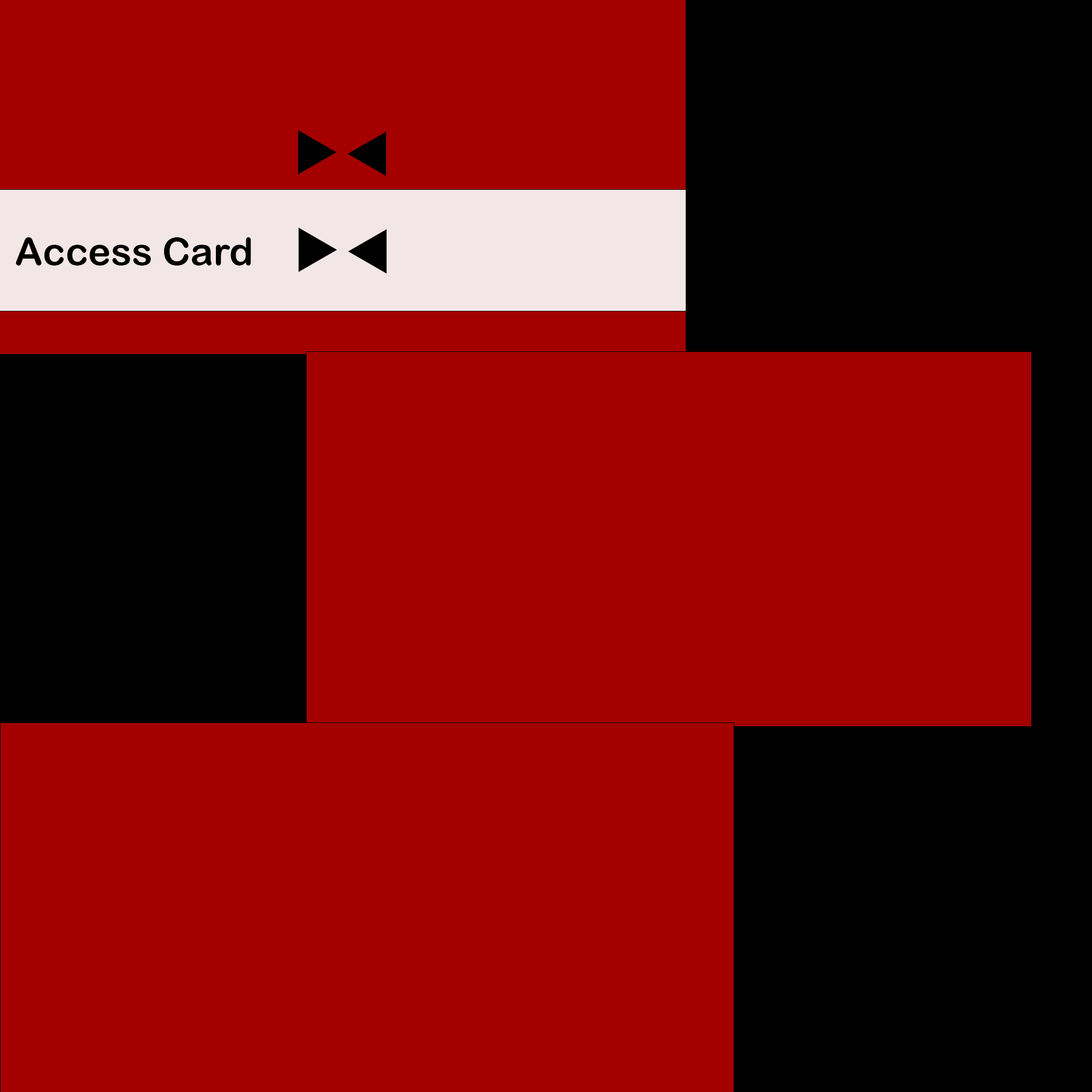
<style>
.page{position:relative;width:1092px;height:1092px;background:#a40000}
.page>*{position:absolute;margin:0}
.t1{font:38.4px "ArialRoundedMTBold";color:#000000}
</style>
<div class="page">
<p class="t1" style="left:15px;top:237px;width:236px;height:29px">Access Card</p>
</div>
